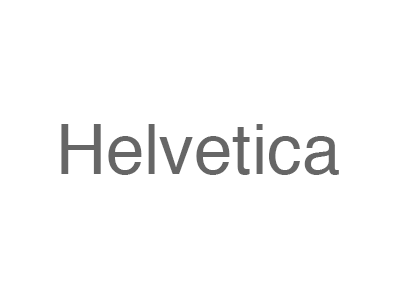
<style>
.page{position:relative;width:400px;height:300px;background:#ffffff}
.page>*{position:absolute;margin:0}
.t1{font:69px "Helvetica";letter-spacing:0.001em;color:#666666}
</style>
<div class="page">
<p class="t1" style="left:61px;top:124px;width:278px;height:51px">Helvetica</p>
</div>
